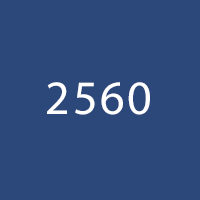
<style>
.page{position:relative;width:200px;height:200px;background:#2c487b}
.page>*{position:absolute;margin:0}
.t1{font:48px "MyriadPro-Regular";letter-spacing:0.05em;color:#ffffff}
</style>
<div class="page">
<p class="t1" style="left:47px;top:82px;width:103px;height:33px">2560</p>
</div>
